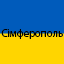
<style>
.page{position:relative;width:64px;height:64px;background:#005bbb}
.page>*{position:absolute;margin:0}
.t1{font:10.7px "MyriadPro-Regular";color:#000000}
</style>
<div class="page">
<p class="t1" style="left:1px;top:29px;width:62px;height:10px">Сімферополь</p>
</div>
